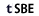
<style>
.page{position:relative;width:39px;height:16px;background:#ffffff}
.page>*{position:absolute;margin:0}
.t1{font:12px "AdobeGothicStd-Bold";letter-spacing:-0.025em;color:#000000}
</style>
<div class="page">
<p class="t1" style="left:14px;top:3px;width:20px;height:11px">SBE</p>
</div>
